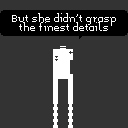
<style>
.page{position:relative;width:128px;height:128px;background:#333333}
.page>*{position:absolute;margin:0}
.t1{font:8px "Memoria";color:#ffffff}
</style>
<div class="page">
<p class="t1" style="left:12px;top:13px;width:104px;height:18px;text-align:center">But she didn't grasp<br>the finest details</p>
</div>
